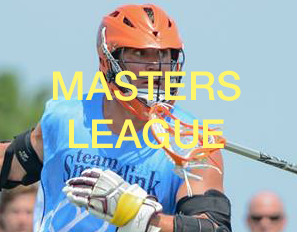
<style>
.page{position:relative;width:297px;height:232px;background:#b1d1e0}
.page>*{position:absolute;margin:0}
.t1{font:40px "HelveticaNeue-Medium";color:#fff568}
</style>
<div class="page">
<p class="t1" style="left:53px;top:70px;width:188px;height:79px;text-align:center">MASTERS<br>LEAGUE</p>
</div>
